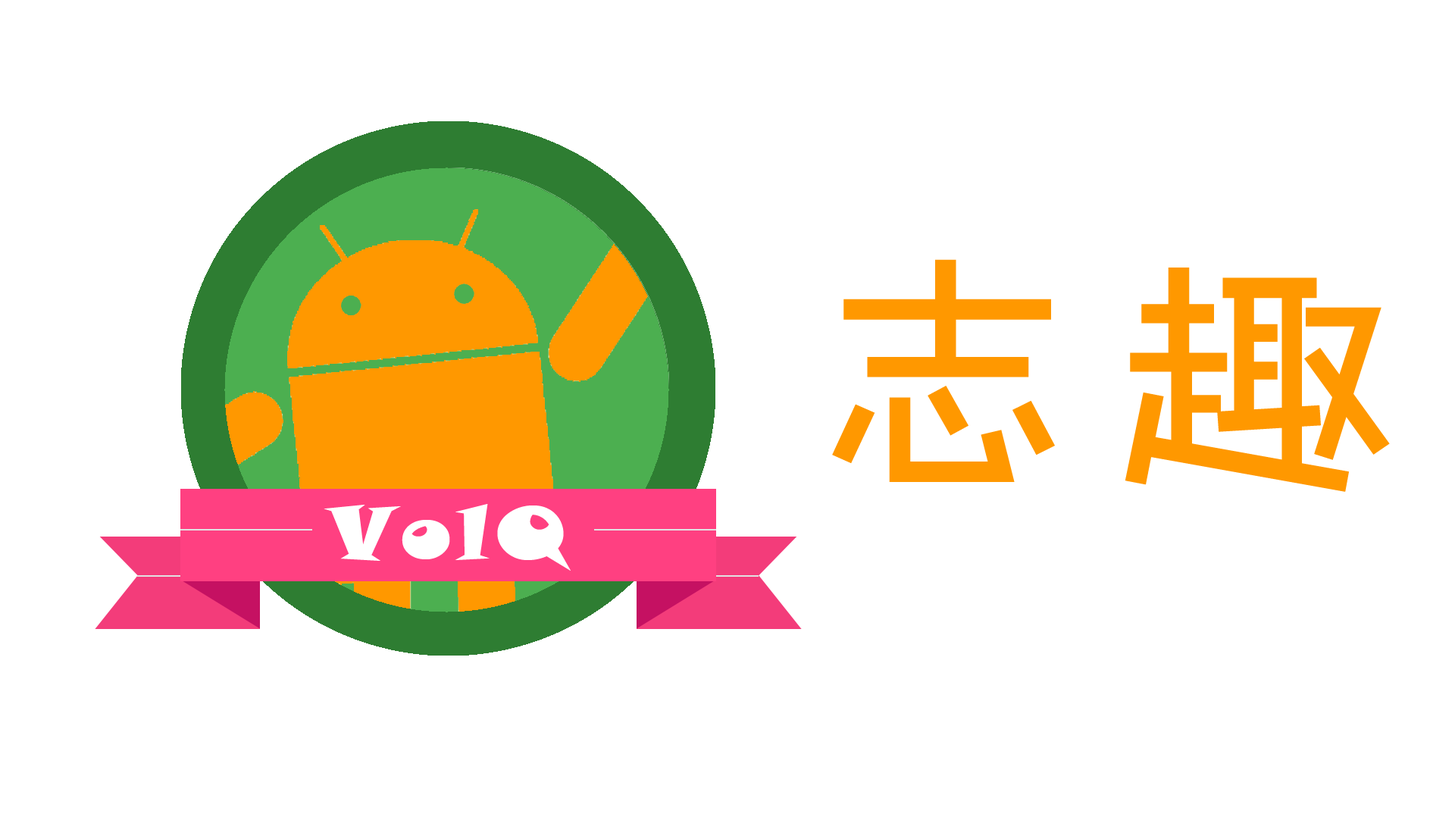
<style>
.page{position:relative;width:1455px;height:820px;background:#ffffff}
.page>*{position:absolute;margin:0}
.t1{font:277.6px "--";letter-spacing:0.1em;color:#ff9800}
.t2{font:74.2px "SnapITC-Regular";letter-spacing:0.075em;color:#ffffff;scale:1.12 1}
</style>
<div class="page">
<p class="t1" style="left:832px;top:259px;width:557px;height:233px">志趣</p>
<p class="t2" style="left:324px;top:504px;width:246px;height:66px">VolQ</p>
</div>
